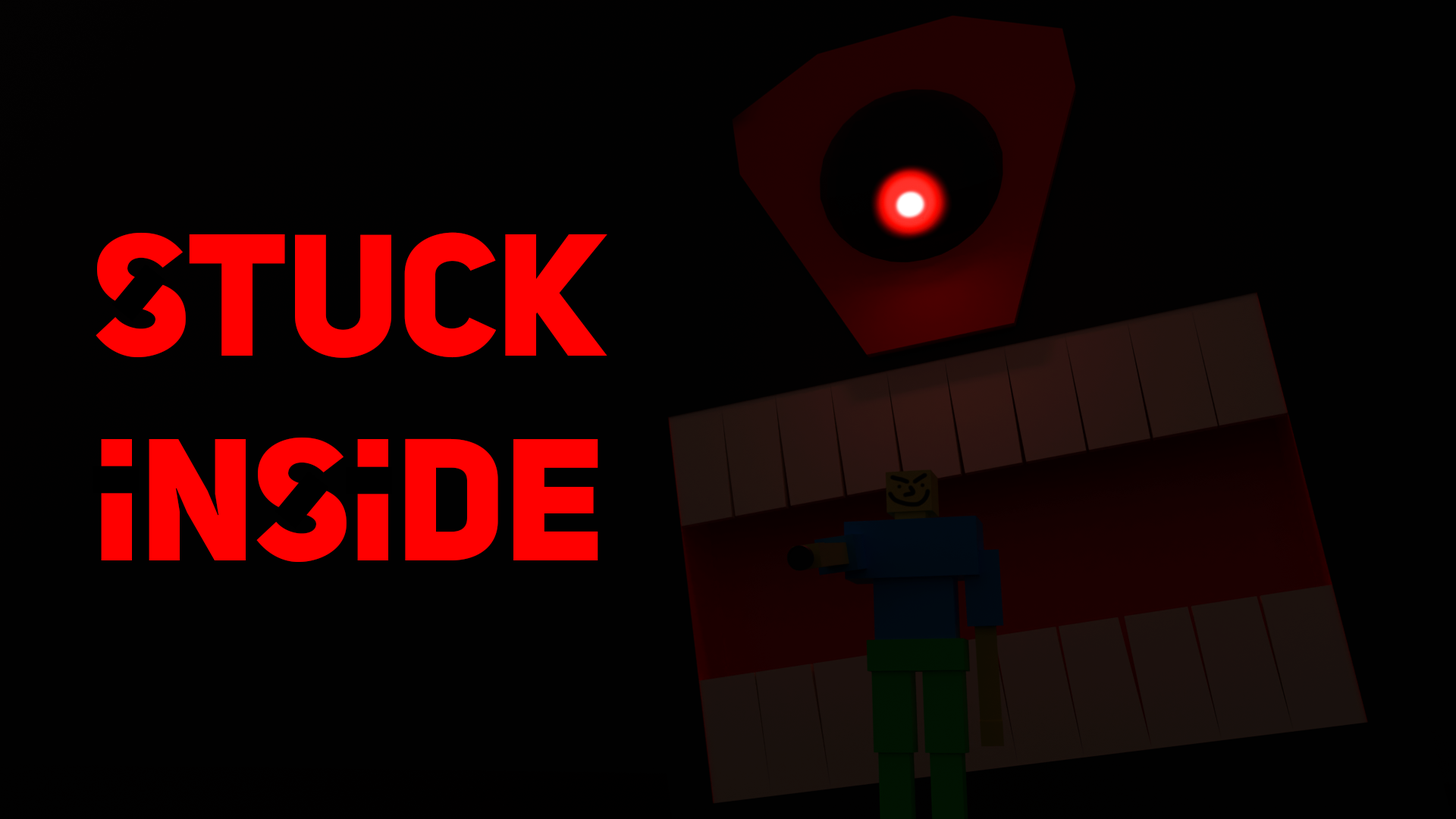
<style>
.page{position:relative;width:1456px;height:819px;background:#010101}
.page>*{position:absolute;margin:0}
.t1{font:171px "UniSansHeavyCAPS";letter-spacing:-0.01em;color:#ff0000}
</style>
<div class="page">
<p class="t1" style="left:96px;top:232px;width:511px;height:331px;text-align:center">Stuck<br>Inside</p>
</div>
